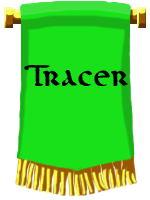
<style>
.page{position:relative;width:150px;height:200px;background:#19e119}
.page>*{position:absolute;margin:0}
.t1{font:29.2px "DKNorthumbria";letter-spacing:0.025em;color:#000000}
</style>
<div class="page">
<p class="t1" style="left:24px;top:65px;width:104px;height:21px">Tracer</p>
</div>
